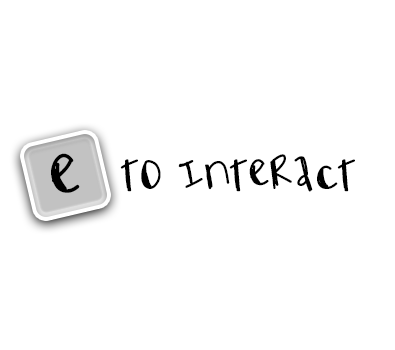
<style>
.page{position:relative;width:395px;height:350px;background:#ffffff}
.page>*{position:absolute;margin:0}
.t1{font:75px "ElectricCircus";color:#000000}
.t2{font:50px "ElectricCircus";letter-spacing:0.01em;color:#000000}
</style>
<div class="page">
<p class="t1" style="left:51px;top:153px;width:29px;height:40px">E</p>
<p class="t2" style="left:120px;top:154px;width:235px;height:38px">TO INTERACT</p>
</div>
